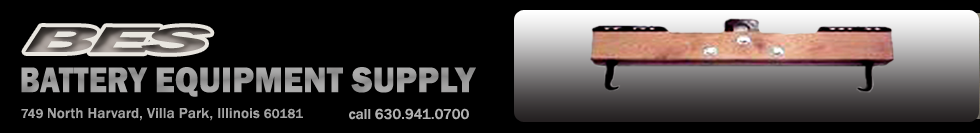
<style>
.page{position:relative;width:980px;height:133px;background:#000000}
.page>*{position:absolute;margin:0}
.t1{font:44px "FranklinGothic-DemiCond";letter-spacing:-0.075em;scale:3.02 1}
.t2{font:36.8px "FranklinGothic-Heavy";letter-spacing:0.01em;color:#9f9f9f;scale:0.92 1}
.t3{font:36.8px "FranklinGothic-Heavy";letter-spacing:0.01em;color:#9f9f9f;scale:0.84 1}
.t4{font:15px "FranklinGothic-Medium";letter-spacing:0.01em;color:#a3a3a3}
.t5{font:15px "FranklinGothic-Medium";color:#a3a3a3}
.t6{font:13.3px "FranklinGothic-Medium";letter-spacing:0.01em;color:#a3a3a3}
.t7{font:15px "FranklinGothic-Medium";color:#b0b0b0}
</style>
<div class="page">
<p class="t1" style="left:25px;top:27px;width:186px;height:26px">BES</p>
<p class="t2" style="left:21px;top:67px;width:455px;height:30px"><span class="t3">BATTERY </span>EQUIPMENT SUPPLY</p>
<p class="t4" style="left:21px;top:108px;width:282px;height:13px"><span class="t5"> </span><span class="t6">749 </span>North Harvard, Villa Park, Illinois <span class="t6">60181</span></p>
<p class="t7" style="left:349px;top:108px;width:120px;height:12px">call 630.941.0700</p>
</div>
